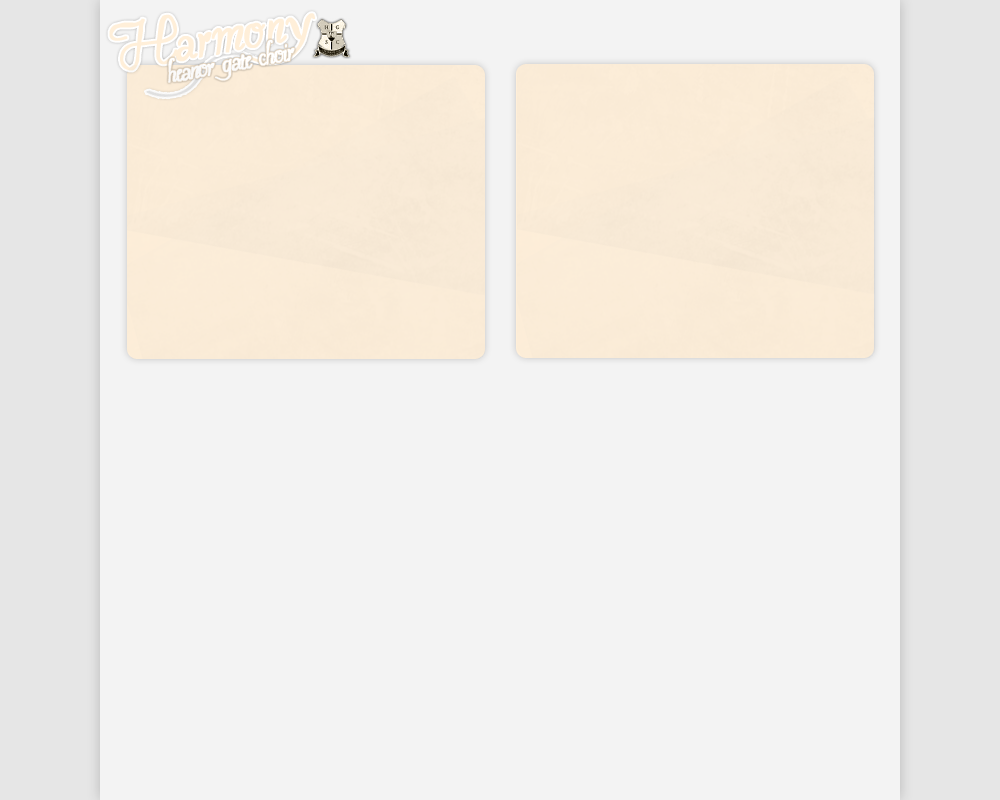
<style>
.page{position:relative;width:1000px;height:800px;background:#f3f3f3}
.page>*{position:absolute;margin:0}
.t1{font:72px "Pavane";color:#ffefd9;font-weight:bold}
.t2{font:36px "Pavane";letter-spacing:-0.05em;color:#ffffff;font-weight:bold}
</style>
<div class="page">
<p class="t1" style="left:109px;top:13px;width:206px;height:58px;rotate:-10deg">Harmony</p>
<p class="t2" style="left:168px;top:40px;width:127px;height:43px;rotate:-10deg">heanor gate choir</p>
</div>
